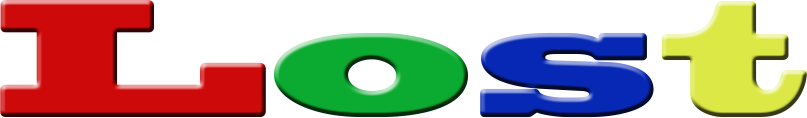
<style>
.page{position:relative;width:807px;height:118px;background:#ffffff}
.page>*{position:absolute;margin:0}
.t1{font:150px "BlackoakStd";color:#ce0909;font-weight:bold}
.t2{font:150px "BlackoakStd";color:#0baa30;font-weight:bold}
.t3{font:150px "BlackoakStd";color:#0728b4;font-weight:bold}
.t4{font:150px "BlackoakStd";color:#dbe846;font-weight:bold}
</style>
<div class="page">
<p class="t1" style="left:0px;top:0px;width:807px;height:118px">L<span class="t2">o</span><span class="t3">s</span><span class="t4">t</span></p>
</div>
